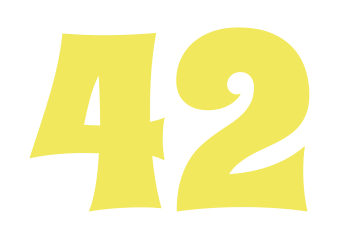
<style>
.page{position:relative;width:354px;height:236px;background:#ffffff}
.page>*{position:absolute;margin:0}
.t1{font:250px "SpicyRice-Regular";color:#f2e85e}
</style>
<div class="page">
<p class="t1" style="left:29px;top:27px;width:281px;height:185px">42</p>
</div>
